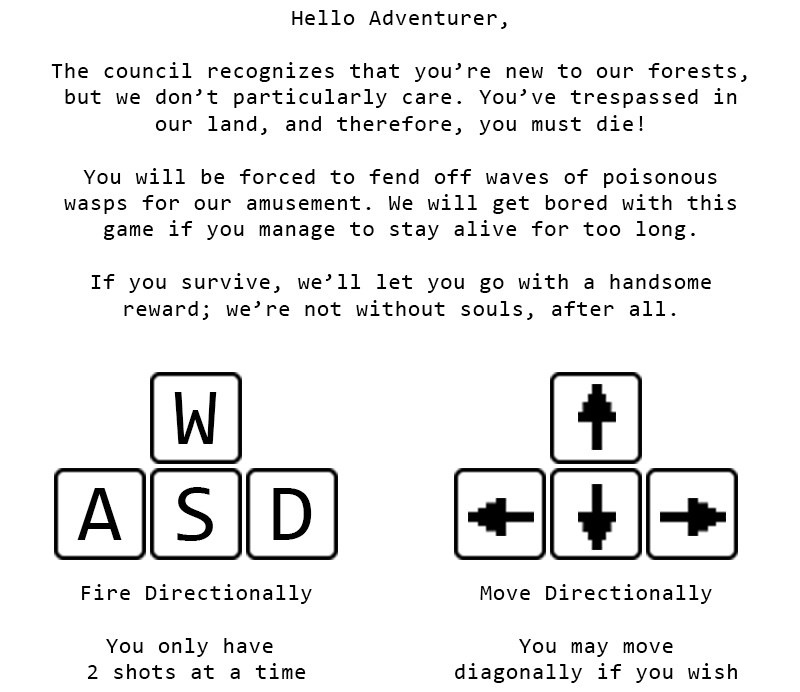
<style>
.page{position:relative;width:800px;height:692px;background:#ffffff}
.page>*{position:absolute;margin:0}
.t1{font:22px "Consolas";letter-spacing:0.04em;color:#000000}
.t2{font:81.7px "Consolas";letter-spacing:0.04em;color:#000000}
</style>
<div class="page">
<p class="t1" style="left:51px;top:10px;width:696px;height:310px;text-align:center">Hello Adventurer,<br><br>The council recognizes that you’re new to our forests,<br>but we don’t particularly care. You’ve trespassed in <br>our land, and therefore, you must die!<br><br>You will be forced to fend off waves of poisonous<br>wasps for our amusement. We will get bored with this<br>game if you manage to stay alive for too long.<br><br>If you survive, we’ll let you go with a handsome reward; we’re not without souls, after all.</p>
<p class="t2" style="left:174px;top:392px;width:43px;height:52px">W</p>
<p class="t2" style="left:77px;top:488px;width:45px;height:52px">A</p>
<p class="t2" style="left:177px;top:487px;width:36px;height:54px">S</p>
<p class="t2" style="left:273px;top:488px;width:39px;height:52px">D</p>
<p class="t1" style="left:82px;top:584px;width:230px;height:95px;text-align:center">Fire Directionally<br><br>You only have <br>2 shots at a time</p>
<p class="t1" style="left:455px;top:584px;width:282px;height:99px;text-align:center">Move Directionally<br><br>You may move<br>diagonally if you wish</p>
</div>
